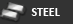
<style>
.page{position:relative;width:73px;height:24px;background:#333333}
.page>*{position:absolute;margin:0}
.t1{font:12px "Calibri-Bold";color:#ffffff}
</style>
<div class="page">
<p class="t1" style="left:31px;top:8px;width:29px;height:8px">STEEL</p>
</div>
